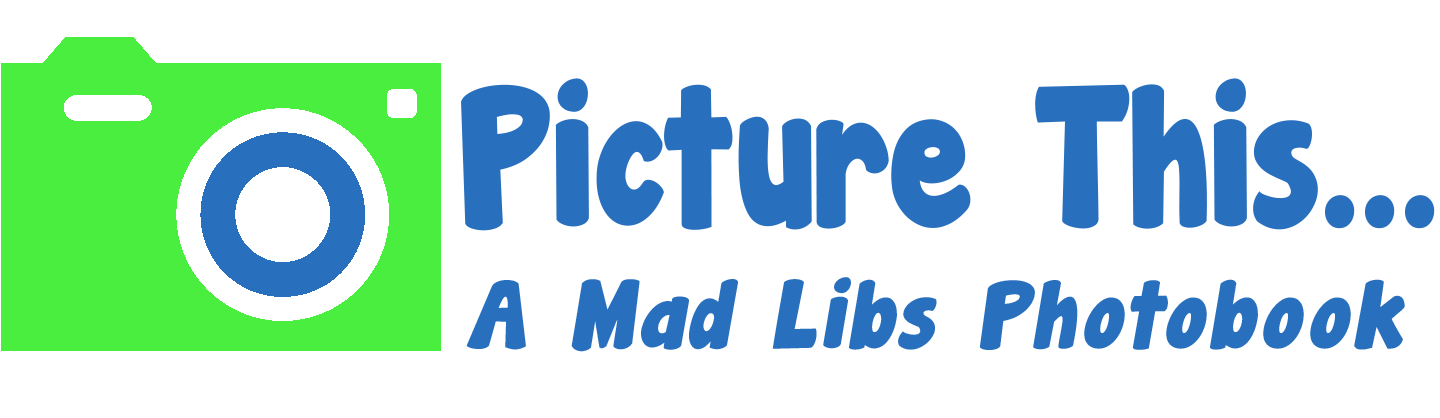
<style>
.page{position:relative;width:1440px;height:418px;background:#ffffff}
.page>*{position:absolute;margin:0}
.t1{font:180px "JandaManateeSolid";color:#286fbe;scale:0.89 1}
.t2{font:86.4px "JandaManateeSolid";letter-spacing:0.05em;color:#286fbe;font-style:italic}
</style>
<div class="page">
<p class="t1" style="left:461px;top:78px;width:974px;height:153px">Picture This...</p>
<p class="t2" style="left:466px;top:277px;width:939px;height:75px">A Mad Libs Photobook</p>
</div>
